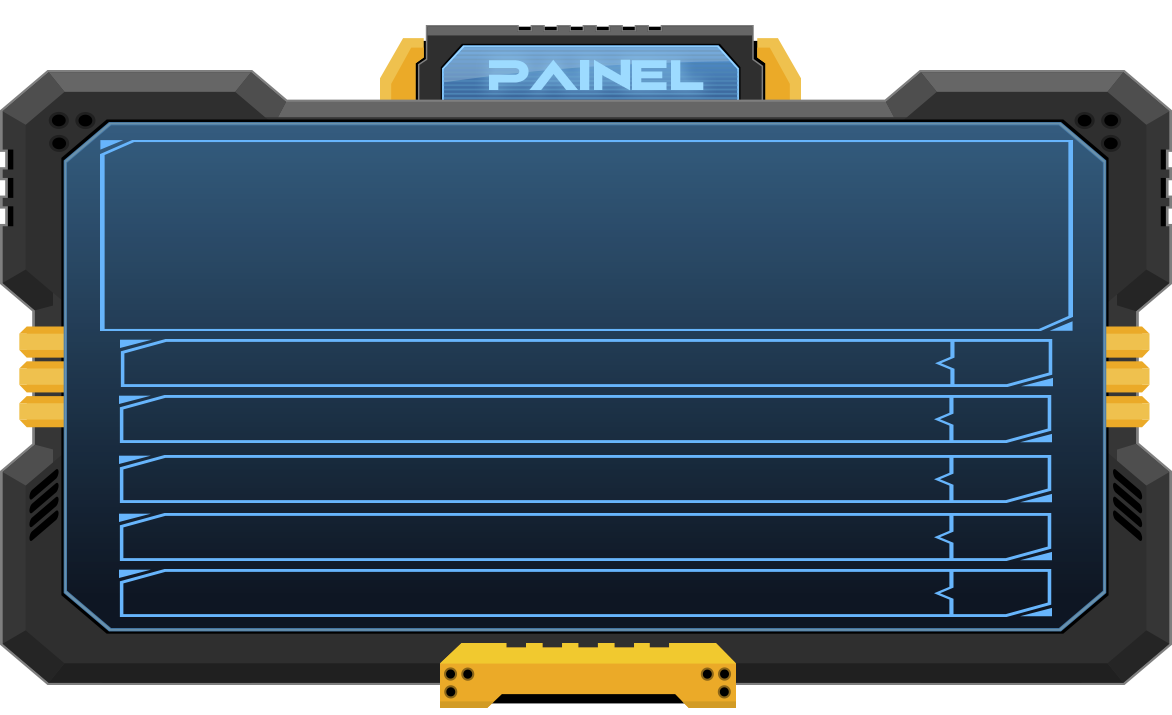
<style>
.page{position:relative;width:1172px;height:715px}
.page>*{position:absolute;margin:0}
.t1{font:52.1px "elasisrg";letter-spacing:-0.025em;color:#9ddbff}
</style>
<div class="page">
<p class="t1" style="left:489px;top:59px;width:215px;height:32px">PAINEL</p>
</div>
